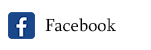
<style>
.page{position:relative;width:151px;height:50px;background:#ffffff}
.page>*{position:absolute;margin:0}
.t1{font:18px "Sylfaen";color:#000000}
</style>
<div class="page">
<p class="t1" style="left:45px;top:18px;width:71px;height:14px">Facebook</p>
</div>
